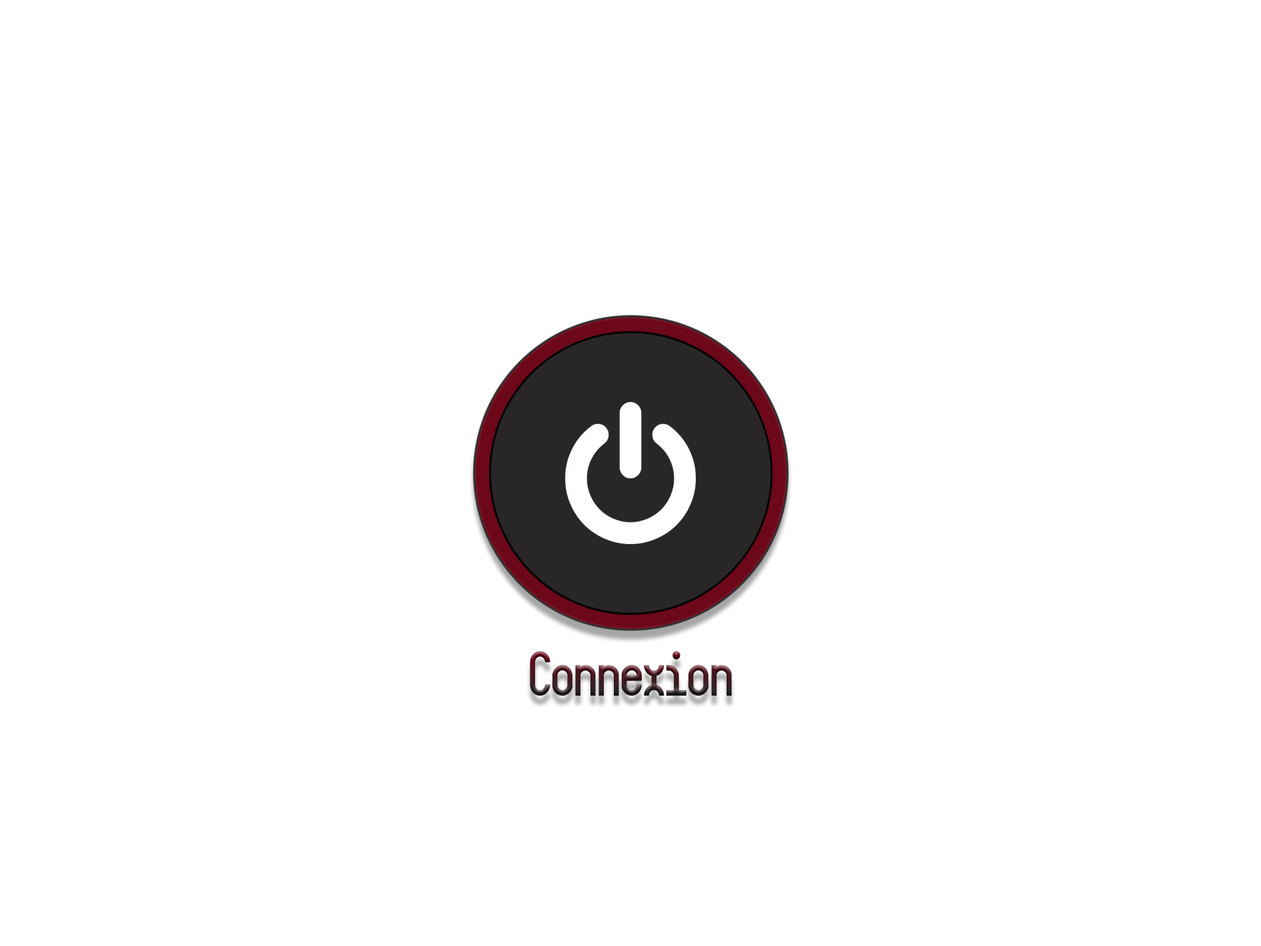
<style>
.page{position:relative;width:1261px;height:946px;background:#ffffff}
.page>*{position:absolute;margin:0}
.t1{font:55.6px "Targa";scale:0.9 1}
</style>
<div class="page">
<p class="t1" style="left:530px;top:651px;width:202px;height:44px">Connexion</p>
</div>
